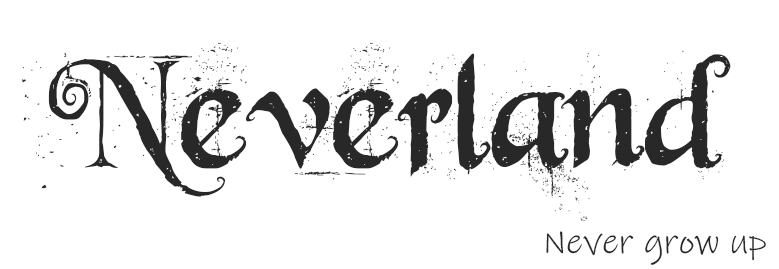
<style>
.page{position:relative;width:779px;height:269px;background:#ffffff}
.page>*{position:absolute;margin:0}
.t1{font:170px "BeyondWonderland";color:#282828}
.t2{font:36px "InkFree";color:#282828}
</style>
<div class="page">
<p class="t1" style="left:21px;top:42px;width:710px;height:180px">Neverland</p>
<p class="t2" style="left:546px;top:231px;width:220px;height:34px">Never grow up</p>
</div>
